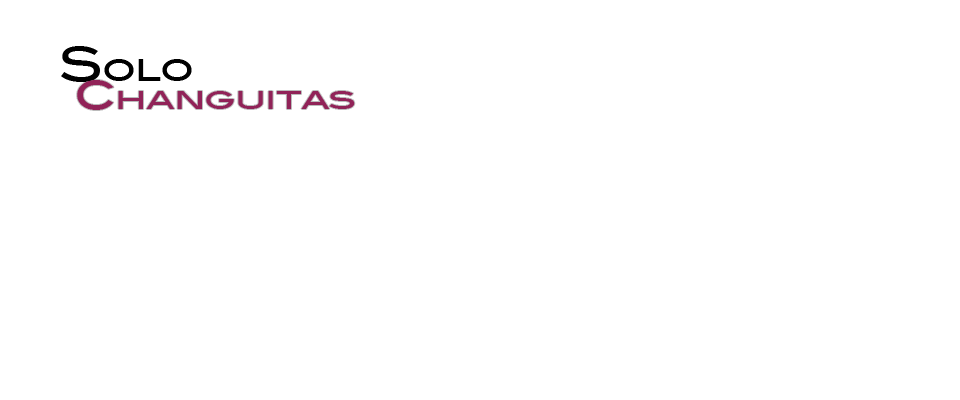
<style>
.page{position:relative;width:960px;height:400px;background:#ffffff}
.page>*{position:absolute;margin:0}
.t1{font:35.1px "BlairMdITCTTMedium";letter-spacing:-0.03em;color:#000000}
.t2{font:47px "BlairMdITCTTMedium";letter-spacing:-0.03em;color:#000000}
.t3{font:28.5px "BlairMdITCTTMedium";letter-spacing:-0.03em;color:#912358;scale:1.2 1}
.t4{font:33px "BlairMdITCTTMedium";letter-spacing:-0.03em;color:#d95594;scale:1.29 1}
.t5{font:47px "BlairMdITCTTMedium";letter-spacing:-0.03em;color:#912358}
</style>
<div class="page">
<p class="t1" style="left:61px;top:46px;width:131px;height:36px"><span class="t2">S</span>olo</p>
<p class="t3" style="left:77px;top:80px;width:278px;height:30px"><span class="t4"><br><br> </span><span class="t5">c</span>hanguitas</p>
</div>
